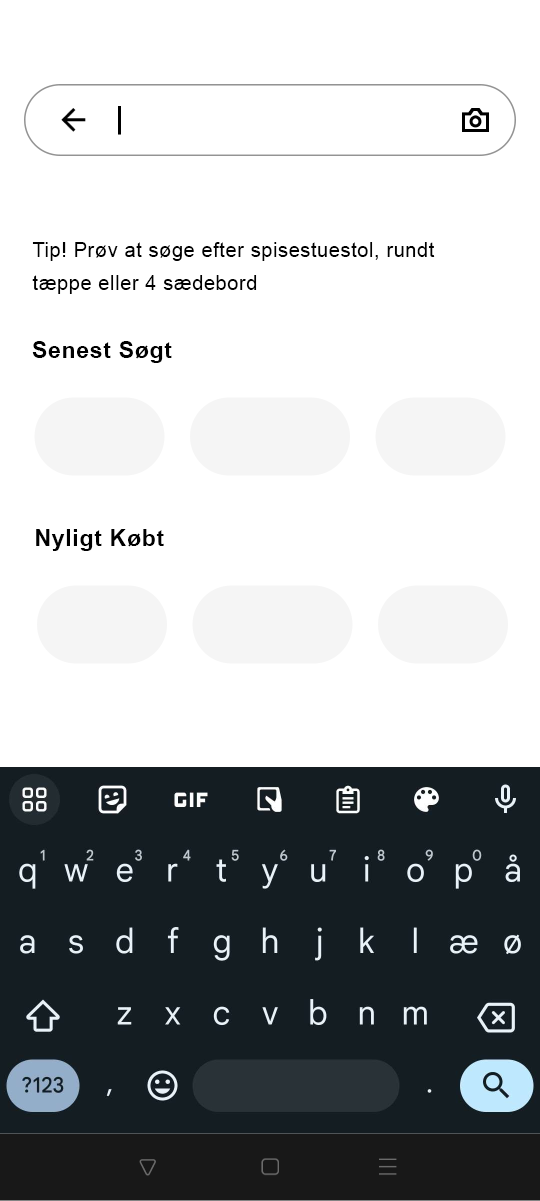
<style>
.page{position:relative;width:540px;height:1201px;background:#ffffff}
.page>*{position:absolute;margin:0}
.t1{font:20px/33px "ArialMT";letter-spacing:0.03em;color:#000000}
.t2{font:23px "Arial-BoldMT";letter-spacing:0.03em;color:#000000}
</style>
<div class="page">
<p class="t1" style="left:32px;top:242px;width:403px;height:52px">Tip! Prøv at søge efter spisestuestol, rundt tæppe eller 4 sædebord</p>
<p class="t2" style="left:32px;top:341px;width:140px;height:22px">Senest Søgt</p>
<p class="t2" style="left:36px;top:529px;width:128px;height:22px">Nyligt Købt</p>
</div>
